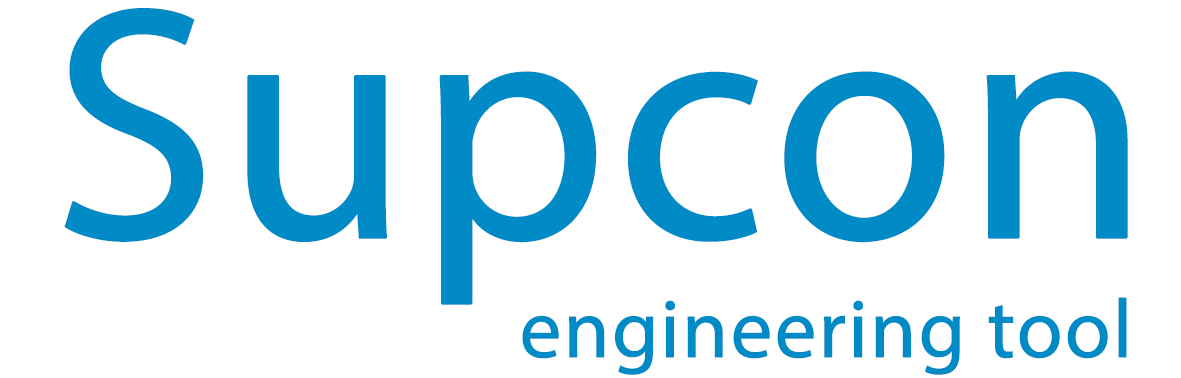
<style>
.page{position:relative;width:1181px;height:378px;background:#ffffff}
.page>*{position:absolute;margin:0}
.t1{font:333.3px "MyriadPro-Regular";color:#008bc7;font-weight:bold}
.t2{font:83.3px "MyriadPro-Regular";color:#008bc7;font-weight:bold}
</style>
<div class="page">
<p class="t1" style="left:64px;top:8px;width:1064px;height:297px">Supcon</p>
<p class="t2" style="left:522px;top:297px;width:605px;height:78px">engineering tool</p>
</div>
